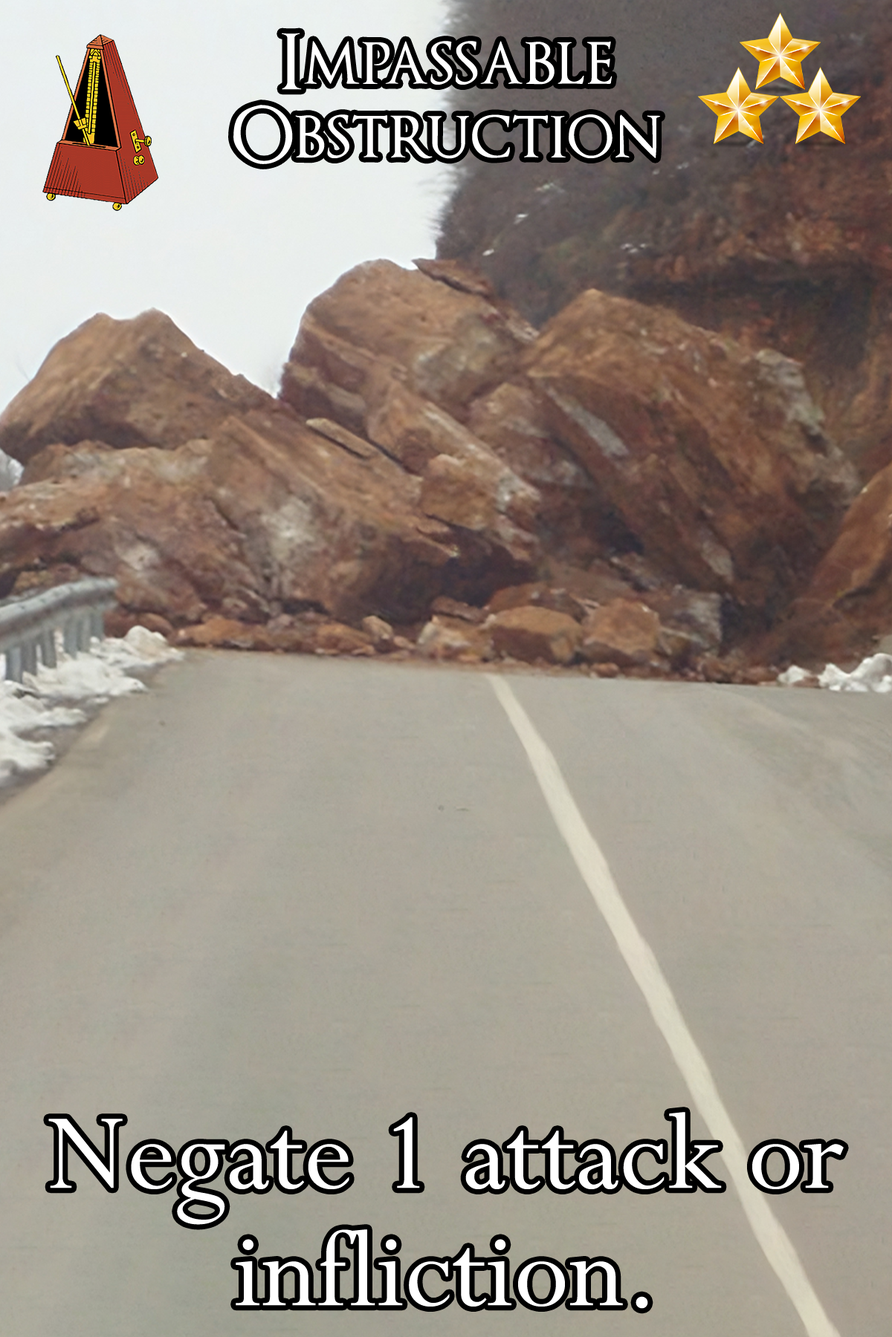
<style>
.page{position:relative;width:892px;height:1337px}
.page>*{position:absolute;margin:0}
.t1{font:130px/73.6px "OptimusPrinceps";color:#ffffff}
.t2{font:206.6px "Perpetua";color:#ffffff}
</style>
<div class="page">
<p class="t1" style="left:233px;top:33px;width:427px;height:131px;text-align:center">Impassable<br>Obstruction</p>
<p class="t2" style="left:48px;top:1112px;width:795px;height:197px">Negate 1 attack or infliction.</p>
</div>
